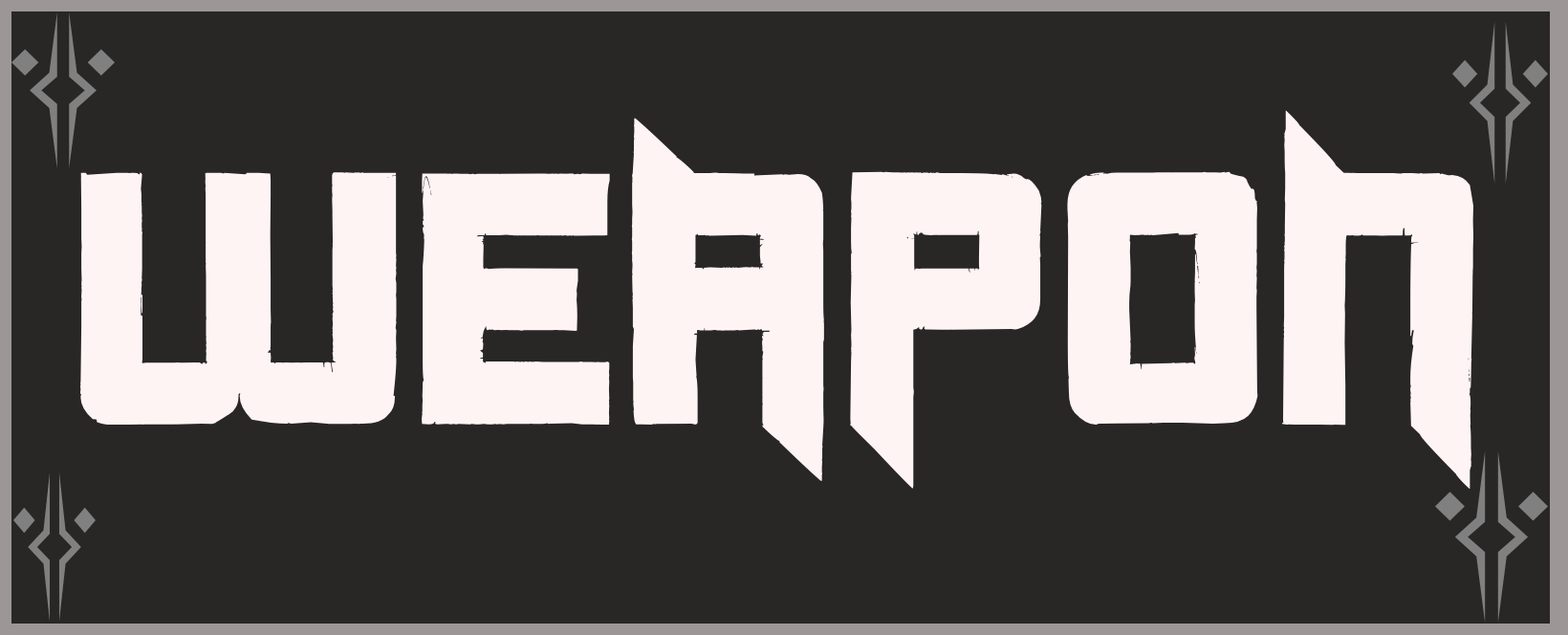
<style>
.page{position:relative;width:1568px;height:635px;background:#292626}
.page>*{position:absolute;margin:0}
.t1{font:358.5px "Duplexide";color:#fff4f4}
</style>
<div class="page">
<p class="t1" style="left:80px;top:110px;width:1394px;height:380px">Weapon</p>
</div>
